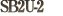
<style>
.page{position:relative;width:63px;height:16px;background:#ffffff}
.page>*{position:absolute;margin:0}
.t1{font:16px "RyuminPro-ExBold";letter-spacing:-0.08em;color:#4a3f32;font-weight:bold;scale:0.9 1}
</style>
<div class="page">
<p class="t1" style="left:0px;top:0px;width:44px;height:13px">SB2U-2</p>
</div>
